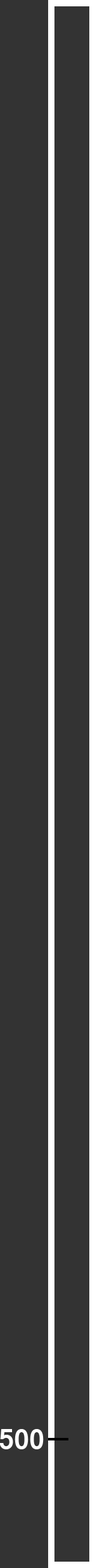
<style>
.page{position:relative;width:95px;height:1568px;background:#333333}
.page>*{position:absolute;margin:0}
.t1{font:30.5px "Latha-Bold";color:#ffffff}
</style>
<div class="page">
<p class="t1" style="left:0px;top:1429px;width:44px;height:20px">500</p>
</div>
